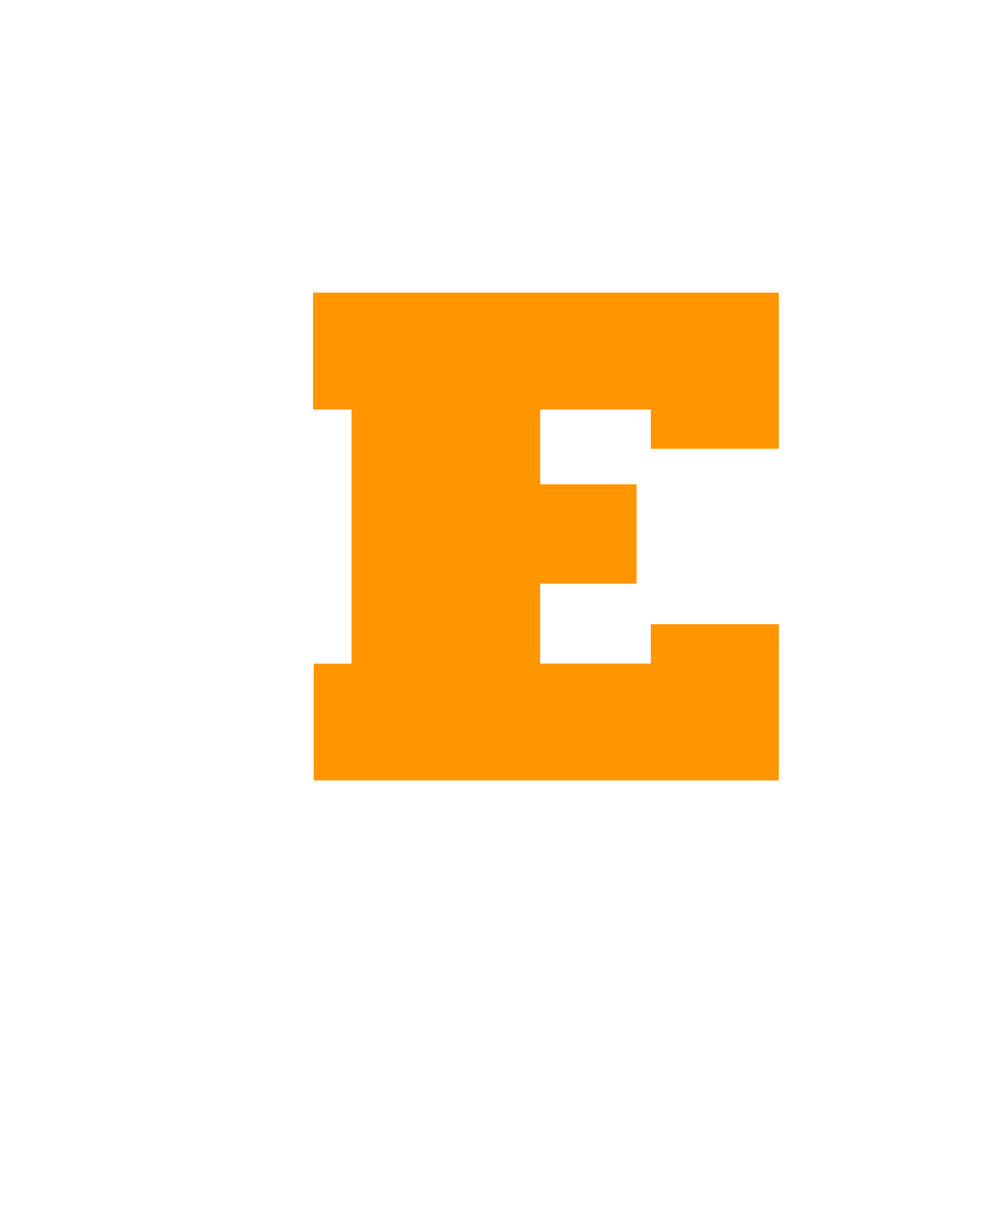
<style>
.page{position:relative;width:984px;height:1212px;background:#ffffff}
.page>*{position:absolute;margin:0}
.t1{font:717.9px "Rockwell-ExtraBold";color:#ff9600}
</style>
<div class="page">
<p class="t1" style="left:313px;top:293px;width:466px;height:487px">E</p>
</div>
